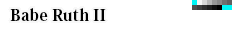
<style>
.page{position:relative;width:232px;height:32px;background:#ffffff}
.page>*{position:absolute;margin:0}
.t1{font:16px "KozMinPro-Heavy";color:#000000}
</style>
<div class="page">
<p class="t1" style="left:10px;top:8px;width:96px;height:13px">Babe Ruth II</p>
</div>
